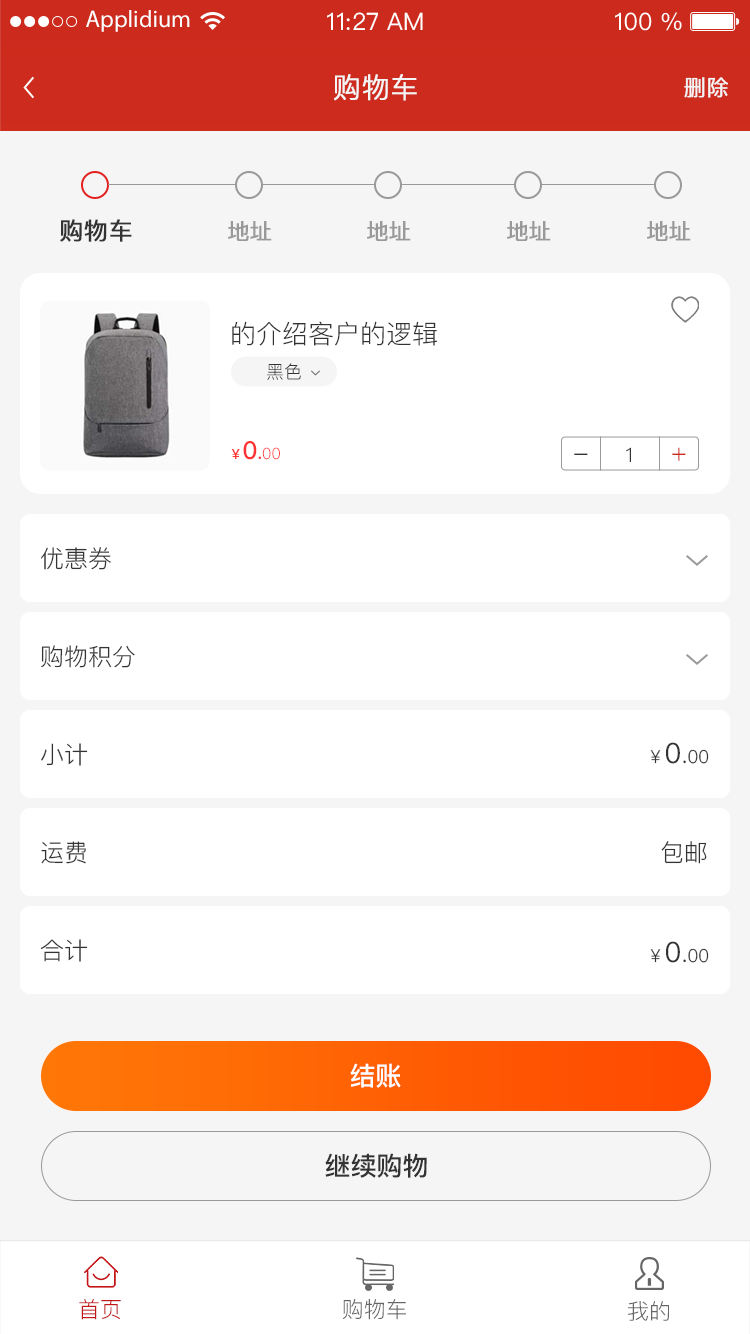
<style>
.page{position:relative;width:750px;height:1334px;background:#ffffff}
.page>*{position:absolute;margin:0}
.t1{font:24px "MyriadPro-Regular";color:#ffffff}
.t2{font:24px "PingFangSC-Regular";color:#ffffff}
.t3{font:28px "PingFang-SC-Regular";color:#f5f5f5;text-transform:uppercase;font-weight:bold}
.t4{font:22px "PingFang-SC-Regular";color:#f5f5f5;text-transform:uppercase;font-weight:bold}
.t5{font:24px "PingFang-SC-Medium";color:#333333;text-transform:uppercase;font-weight:bold}
.t6{font:22px "PingFang-SC-Medium";color:#999999;text-transform:uppercase;font-weight:bold}
.t7{font:26px "PingFang-SC-Regular";color:#333333}
.t8{font:18px "PingFang-SC-Regular";color:#333333}
.t9{font:15.5px "PingFang-SC-Regular";color:#ff3333}
.t10{font:13.9px "PingFang-SC-Bold";color:#ff3333}
.t11{font:24.8px "PingFang-SC-Bold";color:#ff3333}
.t12{font:17px "PingFang-SC-Bold";color:#ff3333}
.t13{font:20px "PingFang-SC-Regular";color:#333333}
.t14{font:26px "PingFang-SC-Regular";color:#cd2b1e}
.t15{font:24px "PingFang-SC-Regular";color:#333333;text-transform:uppercase}
.t16{font:18px "PingFang-SC-Regular";color:#333333;text-transform:uppercase}
.t17{font:28px "PingFang-SC-Medium";color:#333333;text-transform:uppercase}
.t18{font:26px "PingFang-SC-Bold";color:#ffffff;text-transform:uppercase}
.t19{font:26px "PingFang-SC-Bold";color:#333333;text-transform:uppercase}
.t20{font:22px "PingFang-SC-Regular";color:#c31618}
.t21{font:22px "PingFang-SC-Regular";color:#666666}
</style>
<div class="page">
<p class="t1" style="left:86px;top:10px;width:104px;height:22px">Applidium</p>
<p class="t2" style="left:327px;top:12px;width:96px;height:18px">11:27 AM</p>
<p class="t2" style="left:615px;top:12px;width:67px;height:19px">100 %</p>
<p class="t3" style="left:334px;top:74px;width:83px;height:27px">购物车</p>
<p class="t4" style="left:684px;top:77px;width:44px;height:21px">删除</p>
<p class="t5" style="left:60px;top:219px;width:72px;height:23px">购物车</p>
<p class="t6" style="left:228px;top:221px;width:44px;height:20px">地址</p>
<p class="t6" style="left:367px;top:221px;width:44px;height:20px">地址</p>
<p class="t6" style="left:507px;top:221px;width:44px;height:20px">地址</p>
<p class="t6" style="left:647px;top:221px;width:44px;height:20px">地址</p>
<p class="t7" style="left:232px;top:321px;width:205px;height:25px">的介绍客户的逻辑</p>
<p class="t8" style="left:267px;top:363px;width:34px;height:17px">黑色</p>
<p class="t9" style="left:231px;top:441px;width:49px;height:19px"><span class="t10">￥</span><span class="t11">0</span><span class="t12">.</span>00</p>
<p class="t13" style="left:626px;top:447px;width:5px;height:15px">1</p>
<p class="t14" style="left:672px;top:447px;width:14px;height:14px">+</p>
<p class="t7" style="left:574px;top:453px;width:14px;height:2px">-</p>
<p class="t15" style="left:41px;top:547px;width:70px;height:23px">优惠券</p>
<p class="t15" style="left:41px;top:645px;width:94px;height:23px">购物积分</p>
<p class="t15" style="left:41px;top:743px;width:47px;height:23px">小计</p>
<p class="t16" style="left:650px;top:742px;width:59px;height:22px">￥<span class="t17">0</span><span class="t15">.</span>00</p>
<p class="t15" style="left:41px;top:841px;width:45px;height:23px">运费</p>
<p class="t15" style="left:661px;top:841px;width:46px;height:23px">包邮</p>
<p class="t15" style="left:40px;top:939px;width:48px;height:23px">合计</p>
<p class="t16" style="left:650px;top:941px;width:59px;height:22px">￥<span class="t17">0</span><span class="t15">.</span>00</p>
<p class="t18" style="left:350px;top:1063px;width:51px;height:25px">结账</p>
<p class="t19" style="left:325px;top:1153px;width:102px;height:25px">继续购物</p>
<p class="t20" style="left:79px;top:1299px;width:42px;height:21px">首页</p>
<p class="t21" style="left:342px;top:1299px;width:64px;height:21px">购物车</p>
<p class="t21" style="left:628px;top:1301px;width:41px;height:20px">我的</p>
</div>
